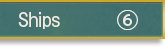
<style>
.page{position:relative;width:165px;height:47px}
.page>*{position:absolute;margin:0}
.t1{font:18px "GothicMB101Pro-Regular";letter-spacing:-0.04em;color:#f2ebe5;scale:0.9 1}
</style>
<div class="page">
<p class="t1" style="left:18px;top:12px;width:42px;height:17px">Ships</p>
</div>
